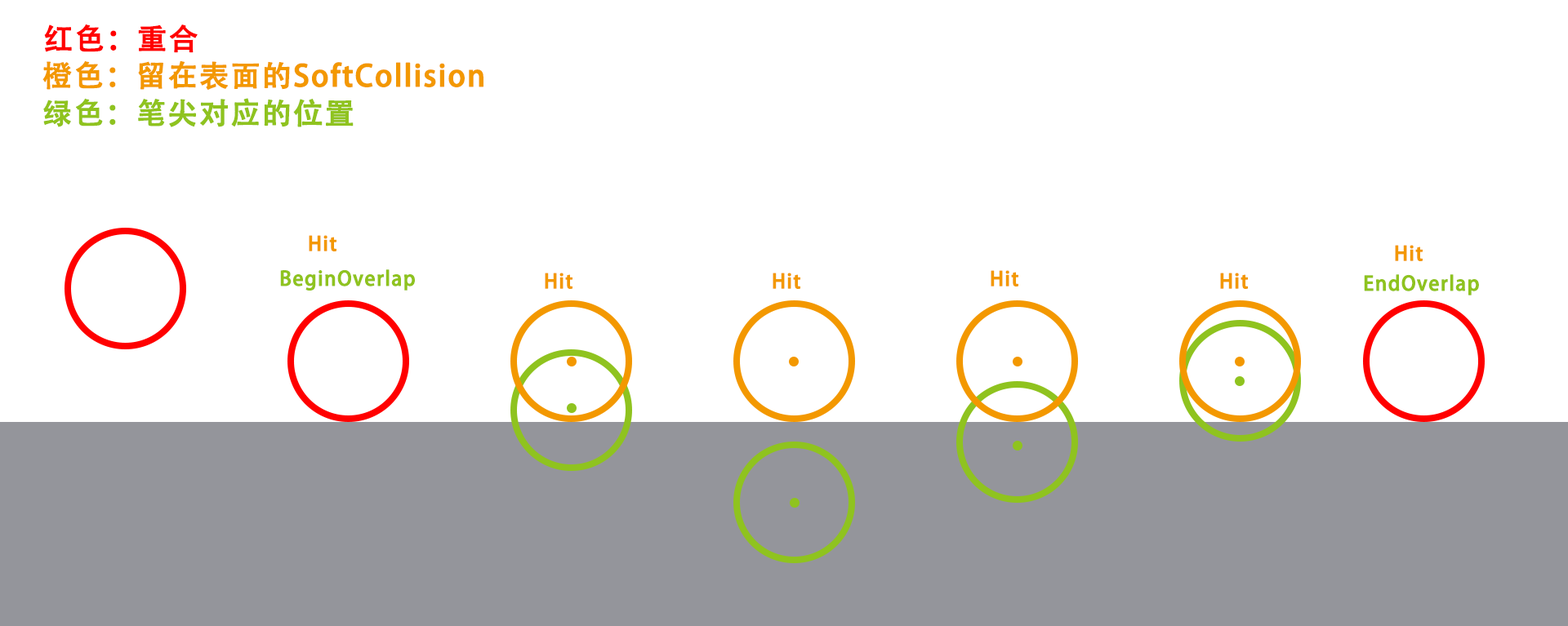
<style>
.page{position:relative;width:1568px;height:626px;background:#ffffff}
.page>*{position:absolute;margin:0}
.t1{font:29.4px "AdobeHeitiStd-Regular";letter-spacing:0.04em;color:#ff0000;font-weight:bold}
.t2{font:29.4px "AdobeHeitiStd-Regular";letter-spacing:0.04em;color:#f39800;font-weight:bold}
.t3{font:29.4px "AdobeHeitiStd-Regular";letter-spacing:0.04em;color:#8fc31f;font-weight:bold}
.t4{font:19.6px "AdobeHeitiStd-Regular";letter-spacing:0.04em;color:#f39800;font-weight:bold}
.t5{font:19.6px "AdobeHeitiStd-Regular";letter-spacing:0.04em;color:#8fc31f;font-weight:bold}
</style>
<div class="page">
<p class="t1" style="left:44px;top:24px;width:154px;height:29px">红色：重合</p>
<p class="t2" style="left:42px;top:60px;width:441px;height:30px">橙色：留在表面的SoftCollision</p>
<p class="t3" style="left:43px;top:98px;width:311px;height:29px">绿色：笔尖对应的位置</p>
<p class="t4" style="left:309px;top:235px;width:27px;height:17px">Hit</p>
<p class="t4" style="left:1395px;top:245px;width:28px;height:16px">Hit</p>
<p class="t5" style="left:280px;top:270px;width:135px;height:21px">BeginOverlap</p>
<p class="t4" style="left:545px;top:273px;width:27px;height:16px">Hit</p>
<p class="t4" style="left:773px;top:273px;width:27px;height:16px">Hit</p>
<p class="t4" style="left:991px;top:270px;width:27px;height:17px">Hit</p>
<p class="t4" style="left:1220px;top:273px;width:28px;height:16px">Hit</p>
<p class="t5" style="left:1364px;top:274px;width:115px;height:22px">EndOverlap</p>
</div>
